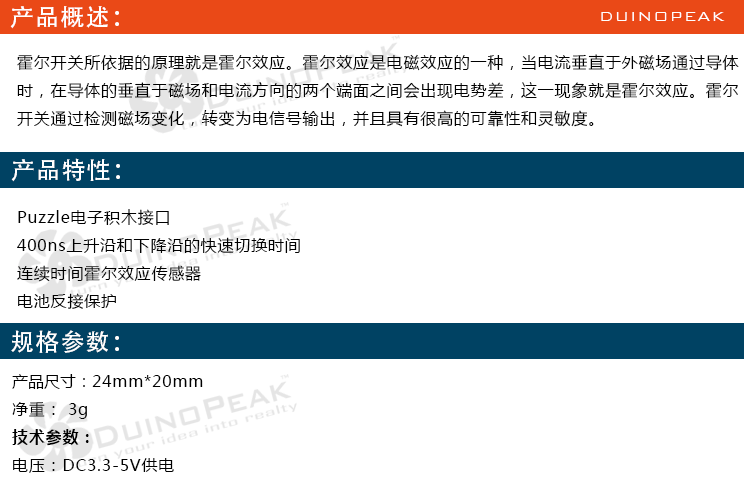
<style>
.page{position:relative;width:744px;height:496px;background:#ffffff}
.page>*{position:absolute;margin:0}
.t1{font:24px "AdobeHeitiStd-Regular";letter-spacing:0.05em;color:#ffffff}
.t2{font:18px "BankGothicBT-Light";letter-spacing:0.05em;color:#ffffff}
.t3{font:16px "MicrosoftYaHei";letter-spacing:0.05em;color:#000000}
.t4{font:16px "MicrosoftYaHei";color:#000000}
.t5{font:16px "MicrosoftYaHei-Bold";letter-spacing:0.05em;color:#000000}
</style>
<div class="page">
<p class="t1" style="left:10px;top:6px;width:109px;height:23px">产品概述：</p>
<p class="t2" style="left:601px;top:12px;width:124px;height:9px">DUINOPEAK</p>
<p class="t3" style="left:17px;top:54px;width:722px;height:73px">霍尔开关所依据的原理就是霍尔效应。霍尔效应是电磁效应的一种，当电流垂直于外磁场通过导体<br>时，在导体的垂直于磁场和电流方向的两个端面之间会出现电势差，这一现象就是霍尔效应。霍尔<br>开关通过检测磁场变化，转变为电信号输出，并且具有很高的可靠性和灵敏度。</p>
<p class="t1" style="left:11px;top:158px;width:109px;height:24px">产品特性：</p>
<p class="t3" style="left:17px;top:209px;width:283px;height:100px">Puzzle电子积木接口<br>400ns上升沿和下降沿的快速切换时间<br>连续时间霍尔效应传感器<br>电池反接保护</p>
<p class="t1" style="left:11px;top:330px;width:108px;height:23px">规格参数：</p>
<p class="t3" style="left:12px;top:374px;width:191px;height:99px"><span class="t4">产品尺寸：</span>24mm*20mm<br>净重： 3g<br><span class="t5">技术参数：<br></span>电压：DC3.3-5V供电</p>
</div>
